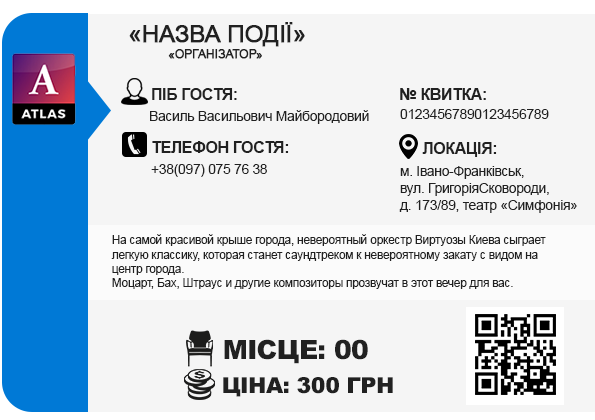
<style>
.page{position:relative;width:595px;height:420px;background:#f5f5f5}
.page>*{position:absolute;margin:0}
.t1{font:24px "ArialMT";letter-spacing:-0.025em;color:#212121;font-weight:bold}
.t2{font:12px "ArialMT";letter-spacing:-0.025em;color:#212121;font-weight:bold}
.t3{font:16px "Arial-BoldMT";letter-spacing:-0.025em;color:#212121}
.t4{font:16px "Arial-BoldMT";letter-spacing:-0.025em;color:#212121;text-transform:uppercase}
.t5{font:14px "ArialMT";letter-spacing:-0.025em;color:#212121}
.t6{font:16px "Arial-BoldMT";color:#212121}
.t7{font:12px "ArialMT";letter-spacing:-0.025em;color:#212121}
.t8{font:26.5px "Arial-Black";letter-spacing:-0.025em;color:#212121}
.t9{font:22.1px "Arial-Black";letter-spacing:-0.025em;color:#212121}
</style>
<div class="page">
<p class="t1" style="left:129px;top:22px;width:176px;height:25px">«НАЗВА ПОДIЇ»</p>
<p class="t2" style="left:168px;top:49px;width:94px;height:10px">«ОРГАНІЗАТОР»</p>
<p class="t3" style="left:152px;top:88px;width:85px;height:12px">ПІБ ГОСТЯ:</p>
<p class="t4" style="left:400px;top:88px;width:86px;height:12px">№ квитка:</p>
<p class="t5" style="left:150px;top:110px;width:219px;height:14px">Василь Васильович Майбородовий</p>
<p class="t5" style="left:400px;top:109px;width:149px;height:10px">01234567890123456789</p>
<p class="t3" style="left:152px;top:141px;width:137px;height:12px"><span class="t6">Т</span>ЕЛЕФОН ГОСТЯ:</p>
<p class="t3" style="left:422px;top:142px;width:75px;height:15px">ЛОКАЦІЯ:</p>
<p class="t5" style="left:151px;top:164px;width:116px;height:13px">+38(097) 075 76 38</p>
<p class="t5" style="left:399px;top:166px;width:178px;height:47px">м. Івано-Франківськ, <br>вул. ГригоріяСковороди, <br>д. 173/89, театр «Симфонія»</p>
<p class="t7" style="left:111px;top:234px;width:435px;height:55px">На самой красивой крыше города, невероятный оркестр Виртуозы Киева сыграет <br>легкую классику, которая станет саундтреком к невероятному закату с видом на <br>центр города.<br>Моцарт, Бах, Штраус и другие композиторы прозвучат в этот вечер для вас.</p>
<p class="t8" style="left:224px;top:339px;width:144px;height:25px">МІСЦЕ: 00</p>
<p class="t9" style="left:223px;top:377px;width:170px;height:20px">ЦІНА: 300 ГРН</p>
</div>
